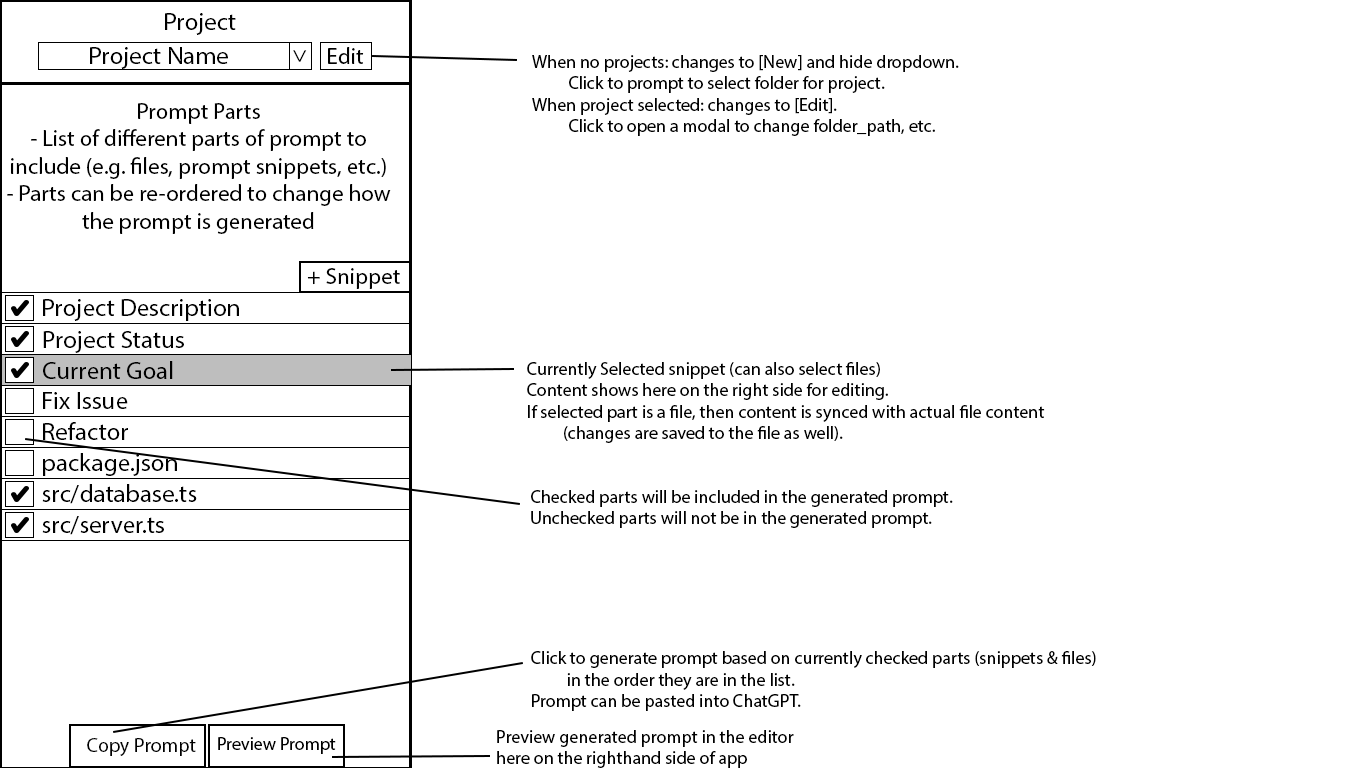
<style>
.page{position:relative;width:1366px;height:768px;background:#ffffff}
.page>*{position:absolute;margin:0}
.t1{font:25px "MyriadPro-Regular";color:#000000}
.t2{font:23px "MyriadPro-Regular";color:#000000}
.t3{font:18px "MyriadPro-Regular";color:#000000}
.t4{font:20px "MyriadPro-Regular";color:#000000}
</style>
<div class="page">
<p class="t1" style="left:165px;top:13px;width:71px;height:22px">Project</p>
<p class="t1" style="left:90px;top:47px;width:138px;height:22px">Project Name</p>
<p class="t1" style="left:293px;top:50px;width:14px;height:12px;rotate:90deg">&gt;</p>
<p class="t2" style="left:328px;top:47px;width:36px;height:17px">Edit</p>
<p class="t3" style="left:532px;top:55px;width:427px;height:81px">When no projects: changes to [New] and hide dropdown.<br> Click to prompt to select folder for project.<br>When project selected: changes to [Edit].<br> Click to open a modal to change folder_path, etc.</p>
<p class="t2" style="left:7px;top:103px;width:384px;height:131px;text-align:center">Prompt Parts<br>- List of different parts of prompt to<br>include (e.g. files, prompt snippets, etc.)<br>- Parts can be re-ordered to change how<br>the prompt is generated</p>
<p class="t2" style="left:307px;top:268px;width:93px;height:21px">+ Snippet</p>
<p class="t1" style="left:43px;top:299px;width:196px;height:22px">Project Description</p>
<p class="t1" style="left:43px;top:331px;width:141px;height:22px">Project Status</p>
<p class="t1" style="left:43px;top:361px;width:130px;height:18px">Current Goal</p>
<p class="t3" style="left:527px;top:362px;width:518px;height:81px">Currently Selected snippet (can also select files)<br>Content shows here on the right side for editing.<br>If selected part is a file, then content is synced with actual file content<br> (changes are saved to the file as well).</p>
<p class="t1" style="left:43px;top:392px;width:85px;height:17px">Fix Issue</p>
<p class="t1" style="left:43px;top:422px;width:85px;height:18px">Refactor</p>
<p class="t1" style="left:43px;top:453px;width:134px;height:23px">package.json</p>
<p class="t1" style="left:42px;top:484px;width:155px;height:20px">src/database.ts</p>
<p class="t3" style="left:531px;top:490px;width:422px;height:38px">Checked parts will be included in the generated prompt.<br>Unchecked parts will not be in the generated prompt.</p>
<p class="t1" style="left:42px;top:516px;width:122px;height:19px">src/server.ts</p>
<p class="t3" style="left:531px;top:651px;width:565px;height:60px">Click to generate prompt based on currently checked parts (snippets &amp; files)<br> in the order they are in the list.<br>Prompt can be pasted into ChatGPT.</p>
<p class="t3" style="left:218px;top:737px;width:118px;height:17px">Preview Prompt</p>
<p class="t3" style="left:497px;top:730px;width:297px;height:38px">Preview generated prompt in the editor<br>here on the righthand side of app</p>
<p class="t4" style="left:87px;top:738px;width:109px;height:18px">Copy Prompt</p>
</div>
